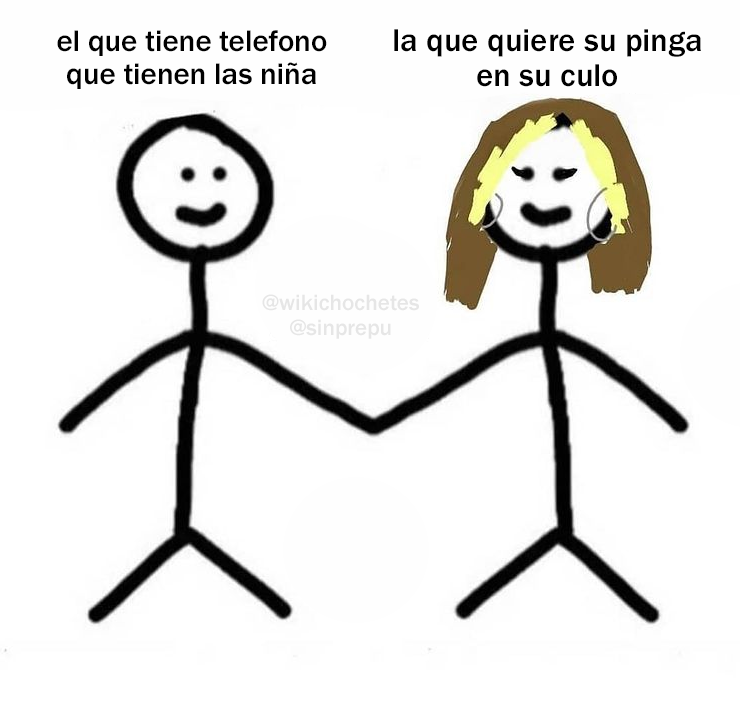
<style>
.page{position:relative;width:740px;height:702px;background:#ffffff}
.page>*{position:absolute;margin:0}
.t1{font:30.8px "FranklinGothic-Medium";color:#000000}
.t2{font:32.8px "FranklinGothic-Medium";color:#000000}
.t3{font:23.1px "FranklinGothic-Medium";color:#e6e6e6}
</style>
<div class="page">
<p class="t1" style="left:57px;top:30px;width:270px;height:59px;text-align:center">el que tiene telefono<br>que tienen las niña</p>
<p class="t2" style="left:394px;top:29px;width:307px;height:58px;text-align:center">la que quiere su pinga<br>en su culo</p>
<p class="t3" style="left:262px;top:294px;width:157px;height:45px;text-align:center">@wikichochetes<br>@sinprepu</p>
</div>
